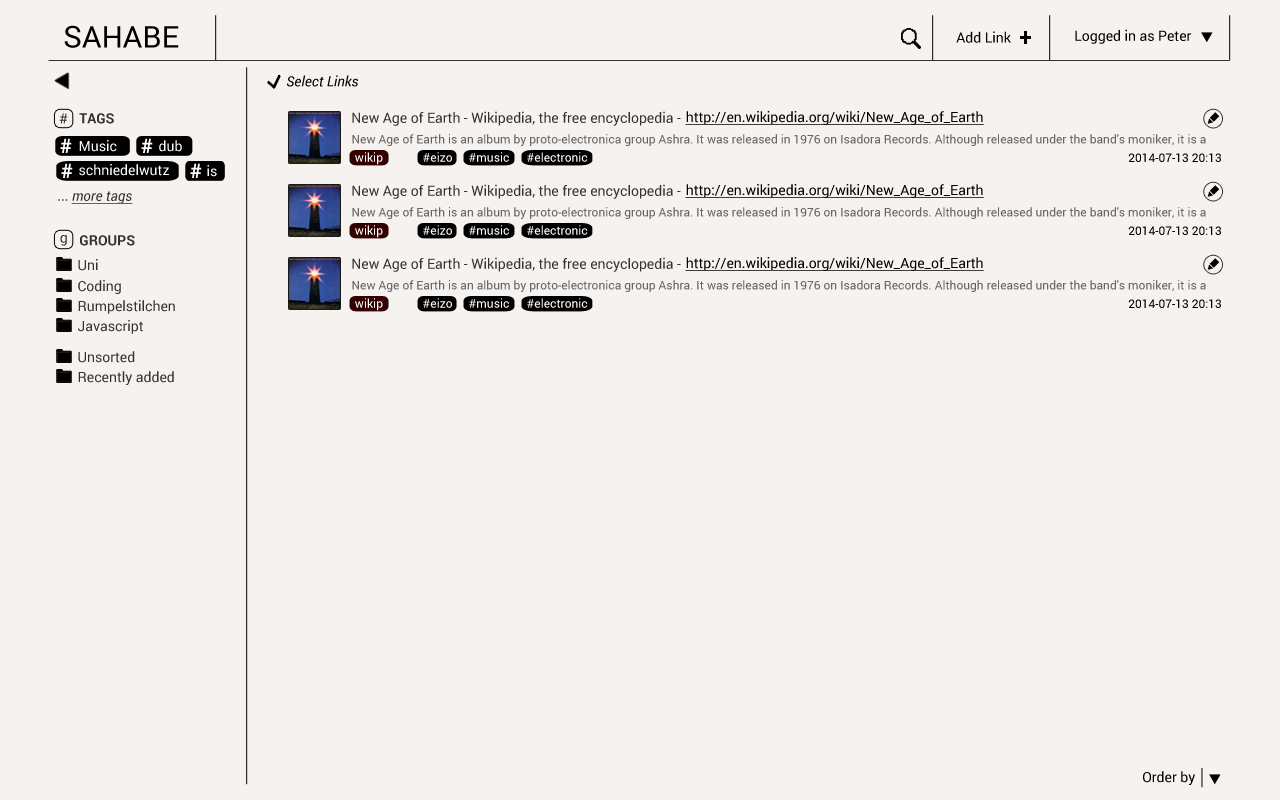
<style>
.page{position:relative;width:1280px;height:800px;background:#f5f2f0}
.page>*{position:absolute;margin:0}
.t1{font:30px "Roboto-Regular";color:#000000}
.t2{font:14px "Roboto-Regular";color:#000000}
.t3{font:24px "Roboto-Bold";color:#000000}
.t4{font:14px "Roboto-Italic";color:#000000}
.t5{font:14px "Roboto-Regular";color:#333333}
.t6{font:14px "Roboto-Bold";color:#333333}
.t7{font:14px "Roboto-Regular";color:#000000;text-decoration:underline}
.t8{font:12px "Roboto-Regular";color:#666666}
.t9{font:20px "Roboto-Bold";color:#ffffff}
.t10{font:14px "Roboto-Regular";color:#ffffff}
.t11{font:12px "Roboto-Regular";color:#ffffff}
.t12{font:12px "Roboto-Regular";color:#000000}
.t13{font:14px "Roboto-Italic";color:#333333;text-decoration:underline}
</style>
<div class="page">
<p class="t1" style="left:64px;top:25px;width:115px;height:23px">SAHABE</p>
<p class="t2" style="left:1075px;top:29px;width:117px;height:15px">Logged in as Peter</p>
<p class="t2" style="left:956px;top:31px;width:55px;height:12px">Add Link</p>
<p class="t3" style="left:1020px;top:31px;width:11px;height:13px">+</p>
<p class="t4" style="left:287px;top:75px;width:71px;height:12px">Select Links</p>
<p class="t5" style="left:59px;top:113px;width:9px;height:11px">#</p>
<p class="t6" style="left:79px;top:113px;width:35px;height:11px">TAGS</p>
<p class="t5" style="left:352px;top:111px;width:329px;height:15px">New Age of Earth - Wikipedia, the free encyclopedia -</p>
<p class="t7" style="left:685px;top:111px;width:299px;height:14px">http://en.wikipedia.org/wiki/New_Age_of_Earth</p>
<p class="t8" style="left:352px;top:134px;width:854px;height:12px">New Age of Earth is an album by proto-electronica group Ashra. It was released in 1976 on Isadora Records. Although released under the band's moniker, it is a solo album by Ashra member Manuel Göttsching.</p>
<p class="t9" style="left:60px;top:138px;width:12px;height:15px">#</p>
<p class="t10" style="left:79px;top:140px;width:38px;height:12px">Music</p>
<p class="t9" style="left:141px;top:138px;width:12px;height:15px">#</p>
<p class="t10" style="left:159px;top:140px;width:23px;height:12px">dub</p>
<p class="t11" style="left:355px;top:152px;width:28px;height:13px">wikip</p>
<p class="t11" style="left:423px;top:152px;width:29px;height:10px">#eizo</p>
<p class="t11" style="left:469px;top:152px;width:40px;height:10px">#music</p>
<p class="t11" style="left:527px;top:152px;width:61px;height:10px">#electronic</p>
<p class="t12" style="left:1128px;top:153px;width:93px;height:9px">2014-07-13 20:13</p>
<p class="t9" style="left:61px;top:163px;width:12px;height:15px">#</p>
<p class="t10" style="left:79px;top:164px;width:90px;height:12px">schniedelwutz</p>
<p class="t9" style="left:190px;top:163px;width:12px;height:15px">#</p>
<p class="t10" style="left:207px;top:165px;width:10px;height:12px">is</p>
<p class="t5" style="left:352px;top:184px;width:329px;height:15px">New Age of Earth - Wikipedia, the free encyclopedia -</p>
<p class="t7" style="left:685px;top:184px;width:299px;height:14px">http://en.wikipedia.org/wiki/New_Age_of_Earth</p>
<p class="t13" style="left:58px;top:191px;width:75px;height:13px"><span class="t5">... </span>more tags</p>
<p class="t8" style="left:352px;top:207px;width:854px;height:12px">New Age of Earth is an album by proto-electronica group Ashra. It was released in 1976 on Isadora Records. Although released under the band's moniker, it is a solo album by Ashra member Manuel Göttsching.</p>
<p class="t11" style="left:355px;top:225px;width:28px;height:13px">wikip</p>
<p class="t11" style="left:423px;top:225px;width:29px;height:10px">#eizo</p>
<p class="t11" style="left:469px;top:225px;width:40px;height:10px">#music</p>
<p class="t11" style="left:527px;top:225px;width:61px;height:10px">#electronic</p>
<p class="t12" style="left:1128px;top:226px;width:93px;height:9px">2014-07-13 20:13</p>
<p class="t5" style="left:60px;top:235px;width:7px;height:11px">g</p>
<p class="t6" style="left:80px;top:235px;width:55px;height:11px">GROUPS</p>
<p class="t5" style="left:352px;top:257px;width:329px;height:15px">New Age of Earth - Wikipedia, the free encyclopedia -</p>
<p class="t7" style="left:685px;top:257px;width:299px;height:14px">http://en.wikipedia.org/wiki/New_Age_of_Earth</p>
<p class="t5" style="left:78px;top:259px;width:20px;height:12px">Uni</p>
<p class="t5" style="left:78px;top:280px;width:43px;height:14px">Coding</p>
<p class="t8" style="left:352px;top:280px;width:854px;height:12px">New Age of Earth is an album by proto-electronica group Ashra. It was released in 1976 on Isadora Records. Although released under the band's moniker, it is a solo album by Ashra member Manuel Göttsching.</p>
<p class="t5" style="left:78px;top:300px;width:97px;height:14px">Rumpelstilchen</p>
<p class="t11" style="left:355px;top:298px;width:28px;height:13px">wikip</p>
<p class="t11" style="left:423px;top:298px;width:29px;height:10px">#eizo</p>
<p class="t11" style="left:469px;top:298px;width:40px;height:10px">#music</p>
<p class="t11" style="left:527px;top:298px;width:61px;height:10px">#electronic</p>
<p class="t12" style="left:1128px;top:299px;width:93px;height:9px">2014-07-13 20:13</p>
<p class="t5" style="left:78px;top:320px;width:65px;height:14px">Javascript</p>
<p class="t5" style="left:78px;top:351px;width:57px;height:12px">Unsorted</p>
<p class="t5" style="left:78px;top:371px;width:96px;height:14px">Recently added</p>
<p class="t2" style="left:1143px;top:771px;width:52px;height:14px">Order by</p>
</div>
